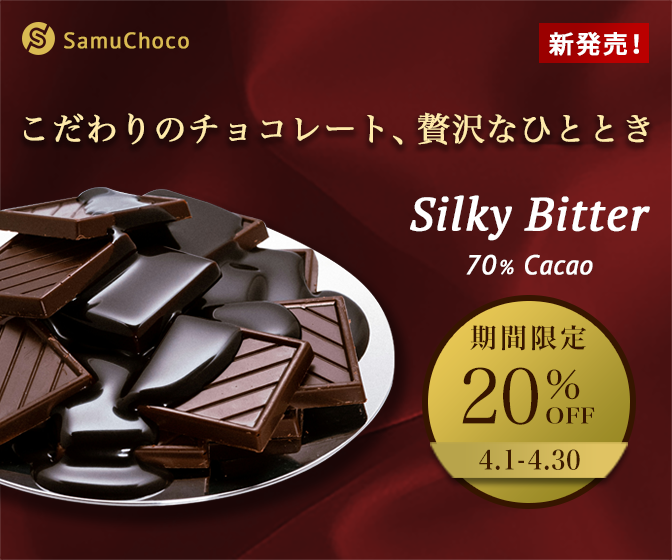
<style>
.page{position:relative;width:672px;height:560px}
.page>*{position:absolute;margin:0}
.t1{font:22.3px "PTSans-Regular";letter-spacing:0.045em;color:#daba52;font-weight:bold}
.t2{font:25px "NotoSansJP-Medium";letter-spacing:0.045em;color:#ffffff;font-weight:bold}
.t3{font:33px "HiraMinProN-W3";letter-spacing:0.01em;color:#ffeaaa;font-weight:bold}
.t4{font:46px "PTSerif-Italic";letter-spacing:0.02em;color:#ffffff;font-weight:bold}
.t5{font:27px "PTSans-Italic";letter-spacing:0.01em;color:#ffffff;font-weight:bold}
.t6{font:20px "PTSans-Italic";letter-spacing:0.01em;color:#ffffff;font-weight:bold}
.t7{font:27px "HiraMinProN-W6";letter-spacing:0.1em;color:#371500}
.t8{font:77px "HiraMinProN-W3";color:#371500;scale:0.91 1}
.t9{font:39.6px "HiraMinProN-W3";letter-spacing:0.01em;color:#371500;scale:1.11 1}
.t10{font:21.6px "HiraMinProN-W6";letter-spacing:0.01em;color:#371500;scale:1.11 1}
.t11{font:26.4px "HiraMinProN-W6";color:#3d1b00;scale:0.91 1}
</style>
<div class="page">
<p class="t1" style="left:64px;top:32px;width:125px;height:17px">SamuChoco</p>
<p class="t2" style="left:549px;top:32px;width:90px;height:24px">新発売！</p>
<p class="t3" style="left:24px;top:112px;width:626px;height:33px">こだわりのチョコレート、贅沢なひととき</p>
<p class="t4" style="left:410px;top:195px;width:240px;height:46px">Silky Bitter</p>
<p class="t5" style="left:466px;top:254px;width:127px;height:21px">70<span class="t6">% </span>Cacao</p>
<p class="t7" style="left:470px;top:325px;width:116px;height:26px">期間限定</p>
<p class="t8" style="left:462px;top:367px;width:76px;height:58px">20</p>
<p class="t9" style="left:547px;top:369px;width:33px;height:31px">%</p>
<p class="t10" style="left:546px;top:407px;width:49px;height:17px">OFF</p>
<p class="t11" style="left:479px;top:449px;width:101px;height:21px">4.1-4.30</p>
</div>
